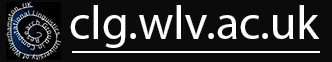
<style>
.page{position:relative;width:332px;height:62px;background:#0b0b0b}
.page>*{position:absolute;margin:0}
.t1{font:47.8px "MyriadPro-Regular";color:#ffffff}
</style>
<div class="page">
<p class="t1" style="left:70px;top:5px;width:250px;height:43px">clg.wlv.ac.uk</p>
</div>
